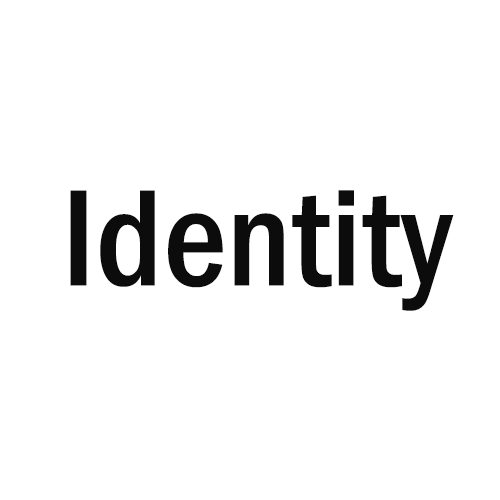
<style>
.page{position:relative;width:500px;height:500px;background:#ffffff}
.page>*{position:absolute;margin:0}
.t1{font:142.3px "FranklinGothic-MediumCond";color:#0c0c0c}
</style>
<div class="page">
<p class="t1" style="left:70px;top:190px;width:384px;height:121px">Identity</p>
</div>
